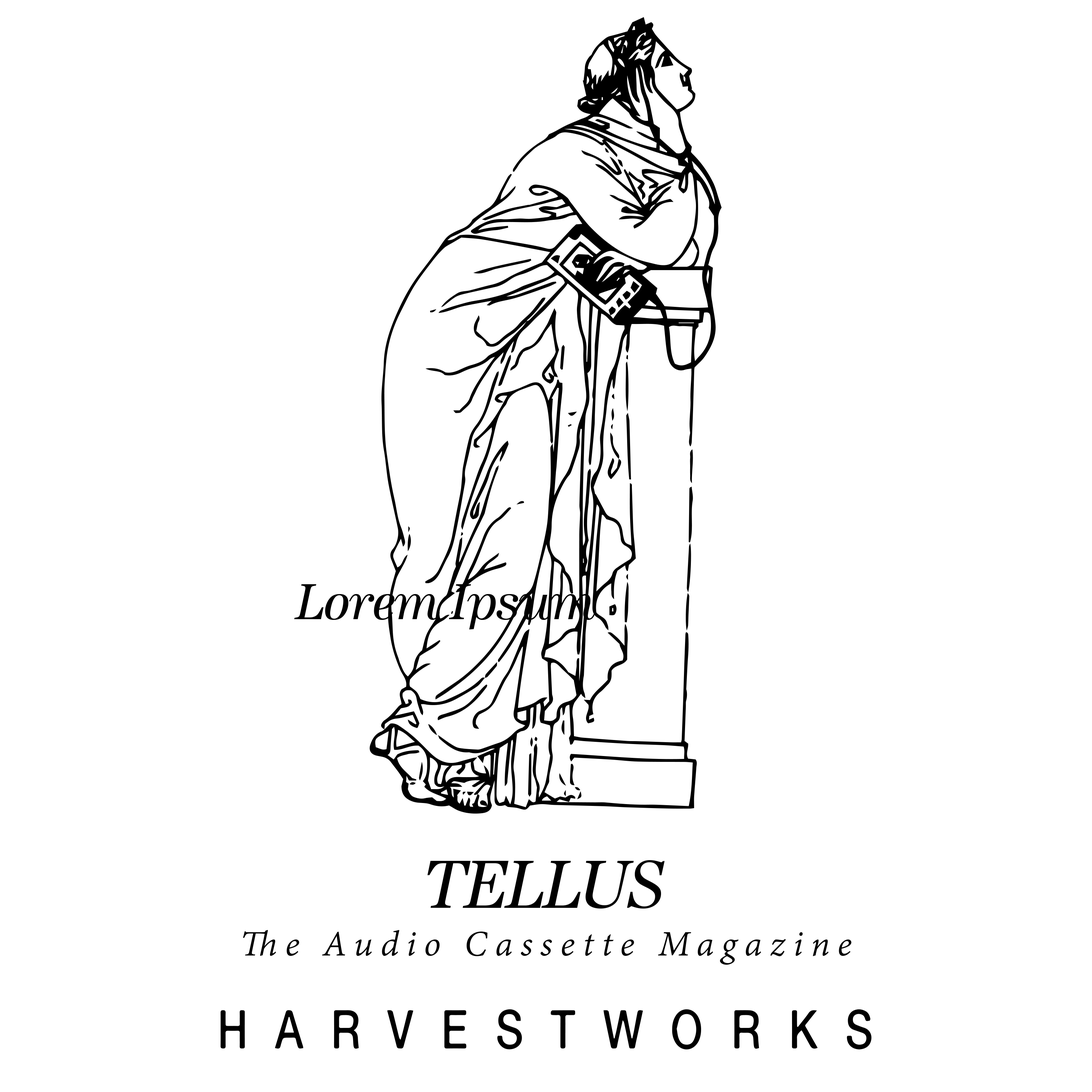
<style>
.page{position:relative;width:1092px;height:1092px;background:#ffffff}
.page>*{position:absolute;margin:0}
.t1{font:52.4px "URWAntiqua-RegIta";letter-spacing:-0.04em;color:#000000}
.t2{font:70.4px "URWAntiqua-RegIta";letter-spacing:-0.04em;color:#000000}
.t3{font:38.9px "AdobeKannada-It";letter-spacing:0.2em;color:#000000}
</style>
<div class="page">
<p class="t1" style="left:294px;top:584px;width:301px;height:46px">Lorem Ipsum</p>
<p class="t2" style="left:427px;top:860px;width:238px;height:49px">TELLUS</p>
<p class="t3" style="left:243px;top:930px;width:608px;height:35px">The Audio Cassette Magazine</p>
</div>
